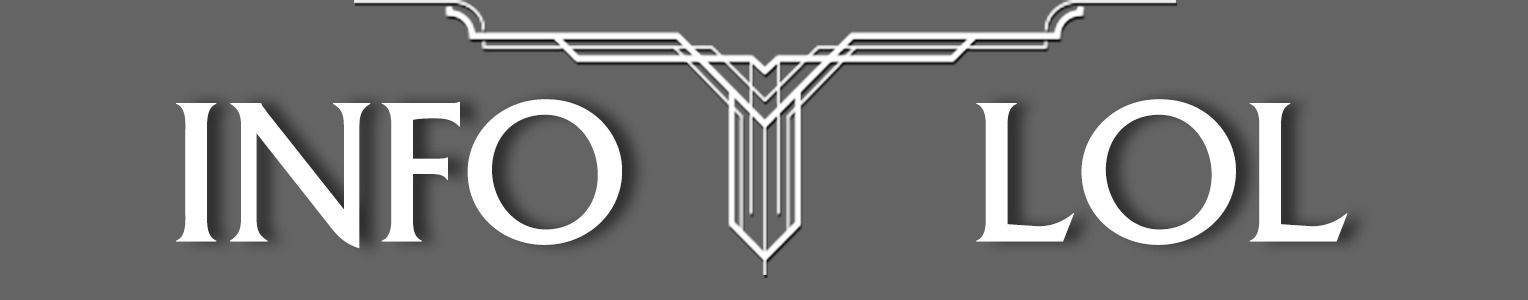
<style>
.page{position:relative;width:1528px;height:300px;background:#656464}
.page>*{position:absolute;margin:0}
.t1{font:210.4px "FrizQuadrataStd";color:#ffffff}
</style>
<div class="page">
<p class="t1" style="left:176px;top:99px;width:446px;height:150px">INFO</p>
<p class="t1" style="left:976px;top:99px;width:372px;height:146px">LOL</p>
</div>
